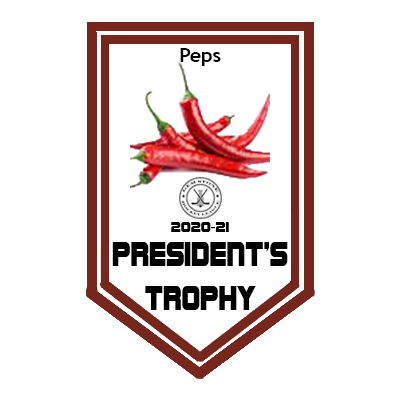
<style>
.page{position:relative;width:400px;height:400px;background:#ffffff}
.page>*{position:absolute;margin:0}
.t1{font:20.1px "TrebuchetMS-Bold";color:#000000}
.t2{font:15px "SFSportsNightNSUpright";color:#000000}
.t3{font:15px "MyriadPro-Regular";color:#000000}
.t4{font:36.4px "SFSportsNightNSUpright";color:#000000;scale:0.76 1}
</style>
<div class="page">
<p class="t1" style="left:180px;top:48px;width:41px;height:18px">Peps</p>
<p class="t2" style="left:171px;top:222px;width:58px;height:10px">2020<span class="t3">-</span>21</p>
<p class="t4" style="left:112px;top:242px;width:176px;height:68px;text-align:center">PRESIDENT’s<br>TROPHY</p>
</div>
